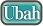
<style>
.page{position:relative;width:43px;height:26px}
.page>*{position:absolute;margin:0}
.t1{font:18px "RyuminPro-ExBold";letter-spacing:-0.08em;color:#ffffff;scale:0.95 1}
</style>
<div class="page">
<p class="t1" style="left:3px;top:5px;width:38px;height:15px">Ubah</p>
</div>
